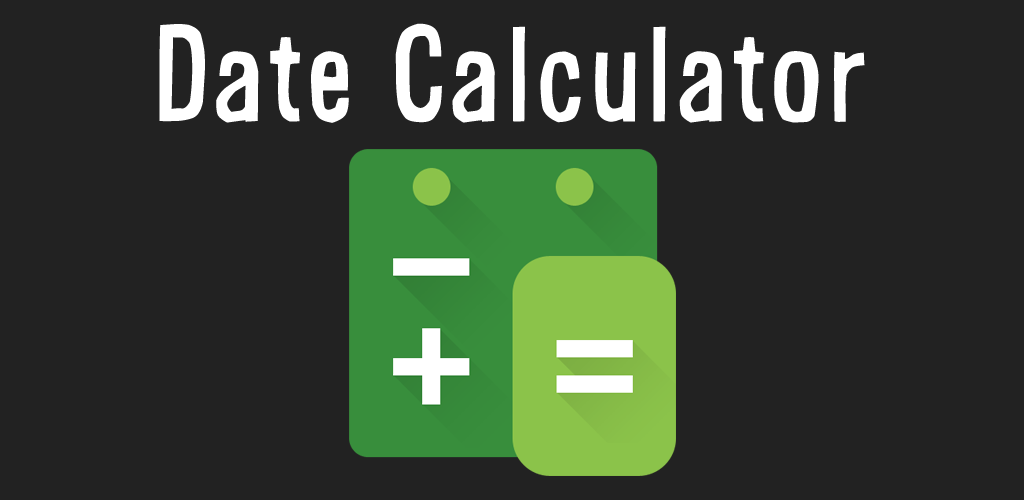
<style>
.page{position:relative;width:1024px;height:500px;background:#222222}
.page>*{position:absolute;margin:0}
.t1{font:128px "Alsina-Ultrajada";color:#ffffff}
</style>
<div class="page">
<p class="t1" style="left:159px;top:23px;width:706px;height:100px">Date Calculator</p>
</div>
